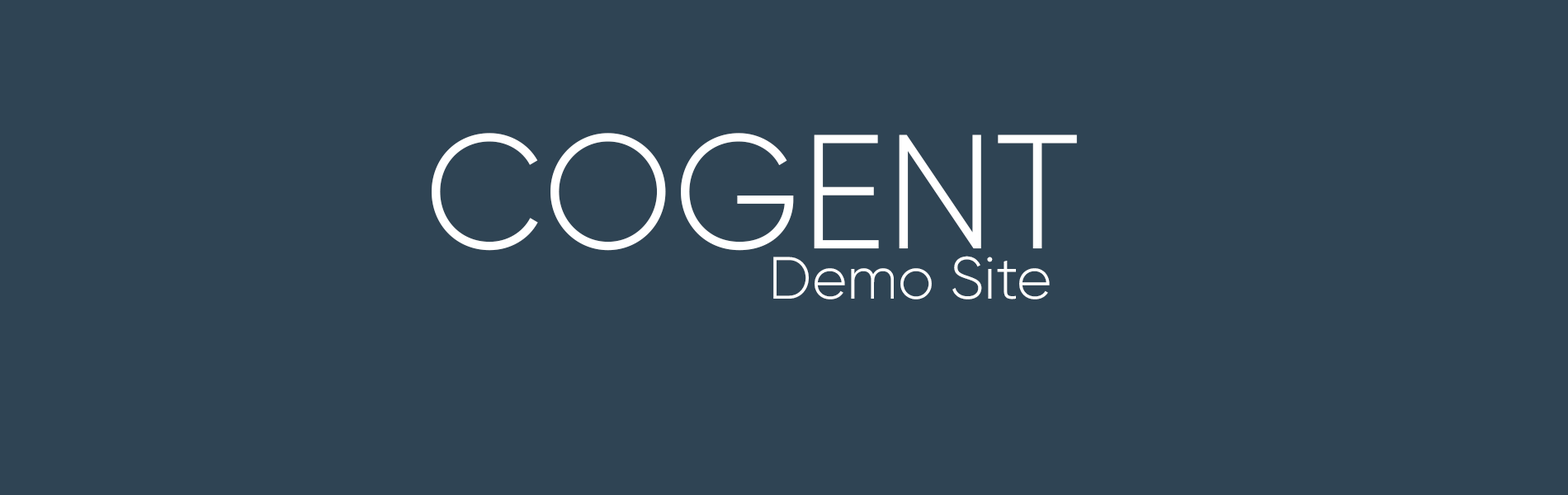
<style>
.page{position:relative;width:1568px;height:495px;background:#2f4454}
.page>*{position:absolute;margin:0}
.t1{font:162px "Gilroy-Light";color:#ffffff}
.t2{font:59.4px "Gilroy-Light";color:#ffffff}
</style>
<div class="page">
<p class="t1" style="left:432px;top:133px;width:645px;height:118px">COGENT</p>
<p class="t2" style="left:773px;top:256px;width:277px;height:44px">Demo Site</p>
</div>
